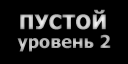
<style>
.page{position:relative;width:128px;height:64px;background:#000000}
.page>*{position:absolute;margin:0}
.t1{font:20px "Tahoma-Bold";color:#c7c7c7;font-weight:bold}
.t2{font:18px "Tahoma-Bold";color:#b5b5b5}
</style>
<div class="page">
<p class="t1" style="left:20px;top:9px;width:86px;height:21px">ПУСТОЙ</p>
<p class="t2" style="left:17px;top:34px;width:94px;height:18px">уровень 2</p>
</div>
